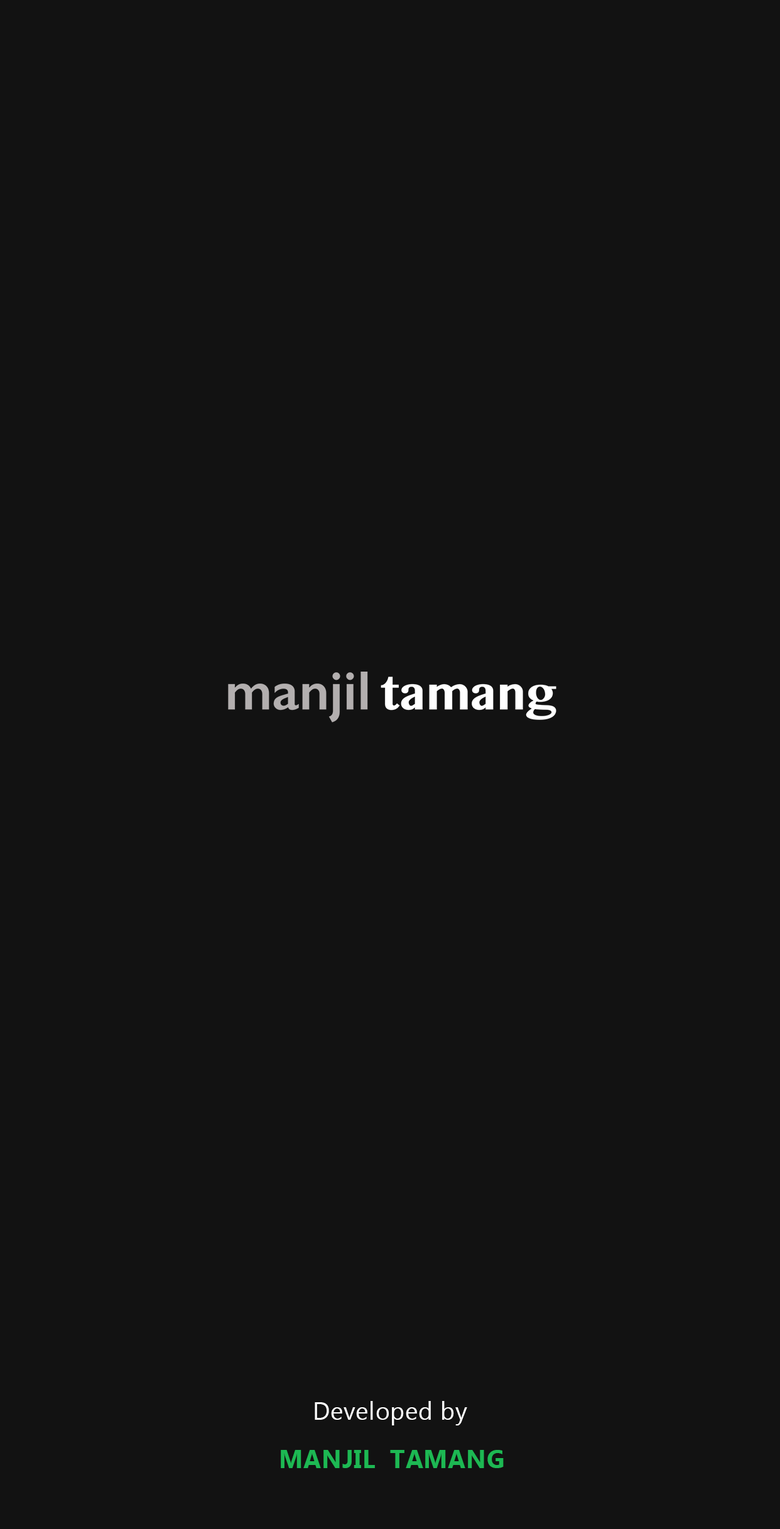
<style>
.page{position:relative;width:780px;height:1529px;background:#121212}
.page>*{position:absolute;margin:0}
.t1{font:25.2px "MicrosoftTaiLe";letter-spacing:0.02em;color:#ffffff;scale:0.97 1}
.t2{font:25.8px "MicrosoftTaiLe-Bold";letter-spacing:0.02em;color:#1db853;scale:0.97 1}
</style>
<div class="page">
<p class="t1" style="left:315px;top:1401px;width:152px;height:25px">Developed by</p>
<p class="t2" style="left:281px;top:1450px;width:222px;height:18px">MANJIL  TAMANG</p>
</div>
